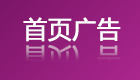
<style>
.page{position:relative;width:140px;height:80px}
.page>*{position:absolute;margin:0}
.t1{font:24.3px "MicrosoftYaHei";color:#ffffff;font-weight:bold}
.t2{font:24.3px "MicrosoftYaHei";font-weight:bold}
</style>
<div class="page">
<p class="t1" style="left:23px;top:17px;width:98px;height:25px">首页广告</p>
<p class="t2" style="left:23px;top:45px;width:98px;height:24px">首页广告</p>
</div>
